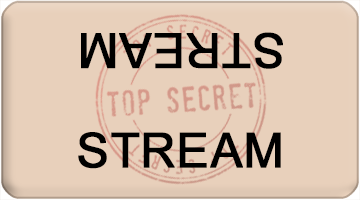
<style>
.page{position:relative;width:360px;height:200px;background:#e8d0bb}
.page>*{position:absolute;margin:0}
.t1{font:48px "ArialMT";color:#000000;font-weight:bold}
</style>
<div class="page">
<p class="t1" style="left:81px;top:32px;width:202px;height:37px;rotate:180deg">STREAM</p>
<p class="t1" style="left:78px;top:132px;width:203px;height:37px">STREAM</p>
</div>
